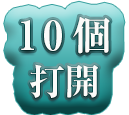
<style>
.page{position:relative;width:129px;height:115px}
.page>*{position:absolute;margin:0}
.t1{font:40px/48px "RyuminPr6N-ExBold";letter-spacing:0.2em;color:#fbfbf9}
.t2{font:36px/48px "RyuminPr6N-ExBold";color:#fbfbf9}
</style>
<div class="page">
<p class="t1" style="left:21px;top:16px;width:89px;height:82px;text-align:center">10個<br><span class="t2">打開</span></p>
</div>
